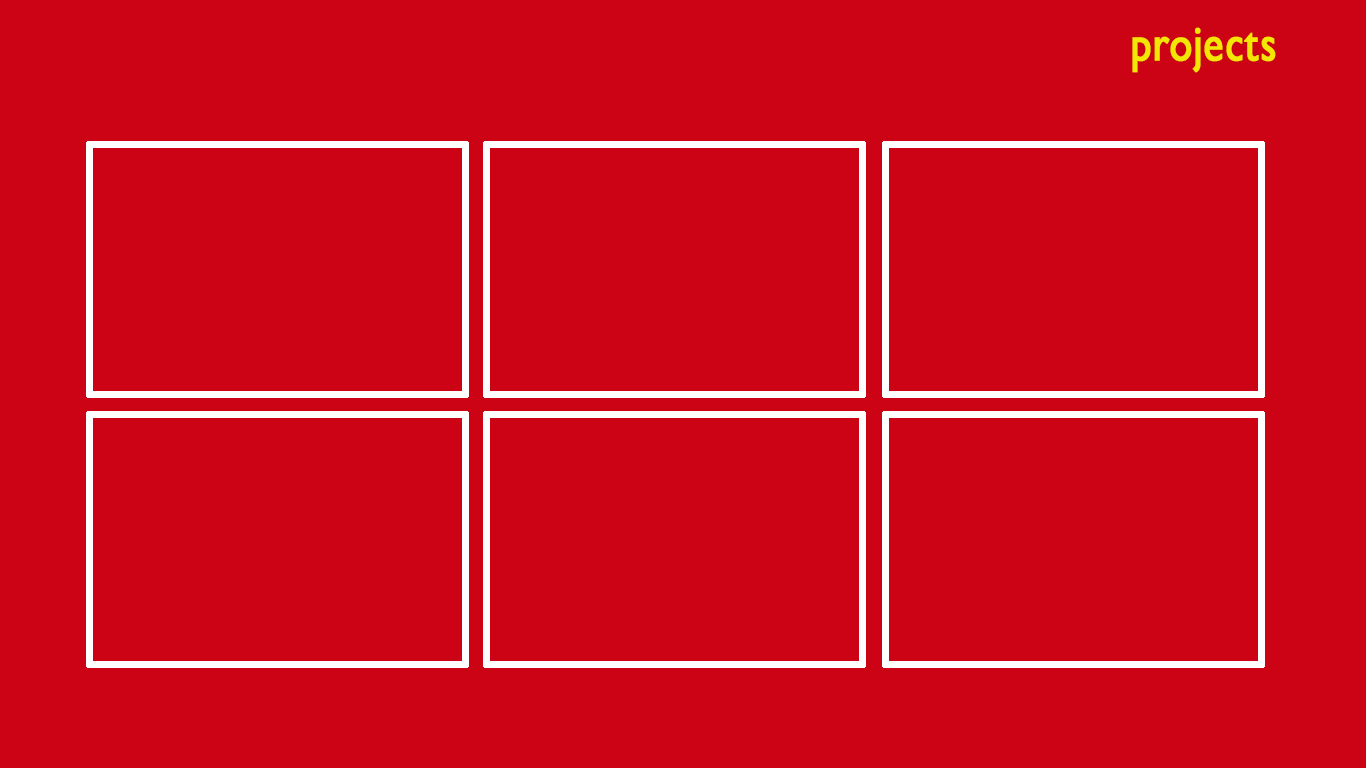
<style>
.page{position:relative;width:1366px;height:768px;background:#cc0215}
.page>*{position:absolute;margin:0}
.t1{font:50.4px "GillSansMT";letter-spacing:0.01em;color:#f3e504;font-weight:bold;scale:0.81 1}
</style>
<div class="page">
<p class="t1" style="left:1132px;top:27px;width:144px;height:46px">projects</p>
</div>
